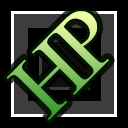
<style>
.page{position:relative;width:128px;height:128px;background:#000000}
.page>*{position:absolute;margin:0}
.t1{font:90.5px "TimesNewRomanPSMT";letter-spacing:-0.05em}
</style>
<div class="page">
<p class="t1" style="left:6px;top:11px;width:103px;height:109px;rotate:-45deg">HP</p>
</div>
